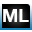
<style>
.page{position:relative;width:32px;height:32px;background:#ffffff}
.page>*{position:absolute;margin:0}
.t1{font:18px "HelveticaNeue-Bold";color:#ffffff}
</style>
<div class="page">
<p class="t1" style="left:3px;top:9px;width:26px;height:13px">ML</p>
</div>
